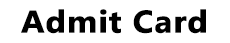
<style>
.page{position:relative;width:230px;height:43px;background:#ffffff}
.page>*{position:absolute;margin:0}
.t1{font:31px "Gadugi-Bold";color:#000000;font-weight:bold;scale:1.08 1}
</style>
<div class="page">
<p class="t1" style="left:21px;top:9px;width:185px;height:25px">Admit Card</p>
</div>
